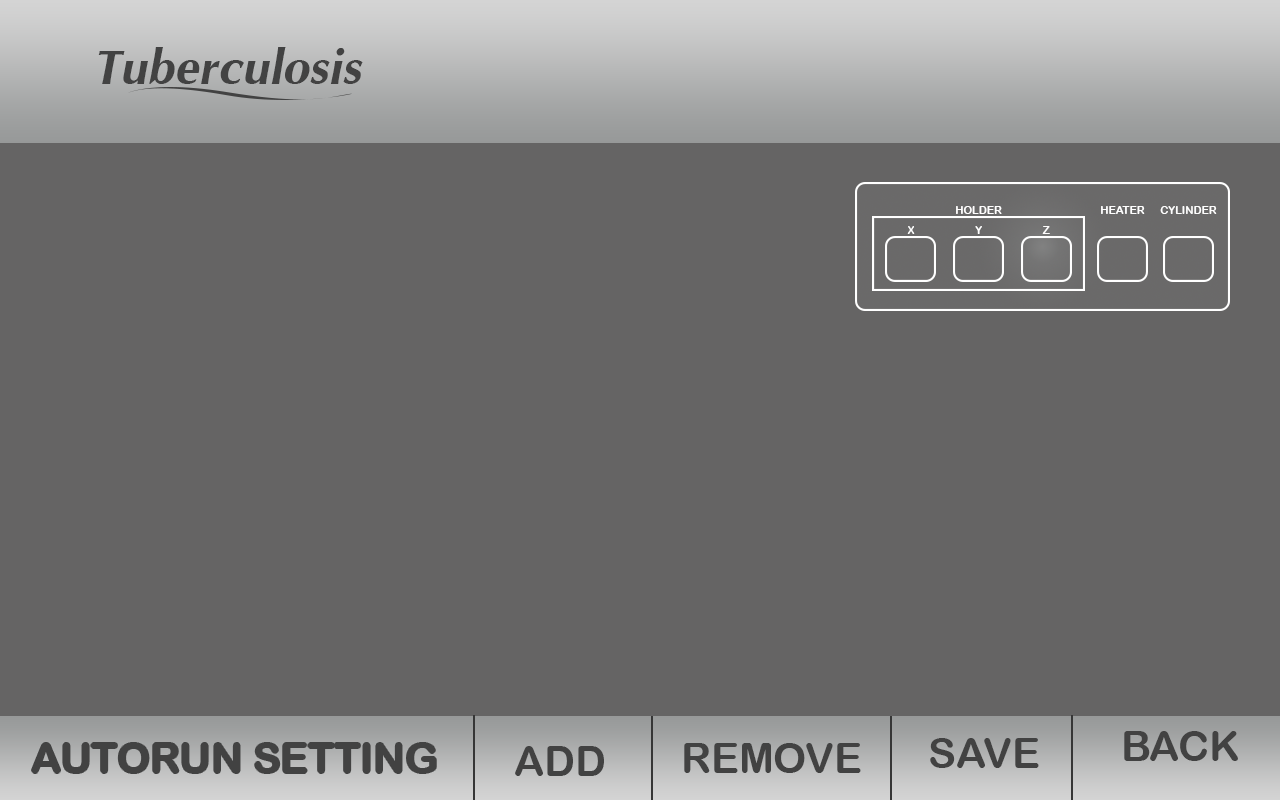
<style>
.page{position:relative;width:1280px;height:800px;background:#656464}
.page>*{position:absolute;margin:0}
.t1{font:75px "IrisUPCBoldItalic";color:#424242}
.t2{font:10.9px "ArialRoundedMTBold";color:#fffefe}
.t3{font:10.9px "ArialRoundedMTBold";color:#ffffff}
.t4{font:10.9px "ArialRoundedMTBold";color:#fdfdfd}
.t5{font:10.9px "ArialRoundedMTBold";color:#fefdfd}
.t6{font:41.7px "ArialRoundedMTBold";color:#424242}
</style>
<div class="page">
<p class="t1" style="left:98px;top:47px;width:265px;height:37px">Tuberculosis</p>
<p class="t2" style="left:956px;top:206px;width:46px;height:8px">HOLDER</p>
<p class="t3" style="left:1101px;top:206px;width:44px;height:8px">HEATER</p>
<p class="t4" style="left:1160px;top:206px;width:57px;height:8px">CYLINDER</p>
<p class="t4" style="left:907px;top:226px;width:8px;height:8px">X</p>
<p class="t3" style="left:975px;top:226px;width:7px;height:8px">Y</p>
<p class="t5" style="left:1042px;top:226px;width:8px;height:8px">Z</p>
<p class="t6" style="left:1124px;top:731px;width:114px;height:30px">BACK</p>
<p class="t6" style="left:32px;top:743px;width:404px;height:30px">AUTORUN SETTING</p>
<p class="t6" style="left:515px;top:746px;width:89px;height:30px">ADD</p>
<p class="t6" style="left:684px;top:743px;width:177px;height:30px">REMOVE</p>
<p class="t6" style="left:930px;top:738px;width:109px;height:30px">SAVE</p>
</div>
